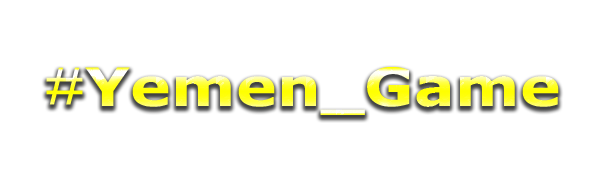
<style>
.page{position:relative;width:599px;height:193px;background:#ffffff}
.page>*{position:absolute;margin:0}
.t1{font:52.8px "Motken-noqta";scale:1.16 1}
</style>
<div class="page">
<p class="t1" style="left:46px;top:67px;width:513px;height:48px">Yemen_Game#</p>
</div>
